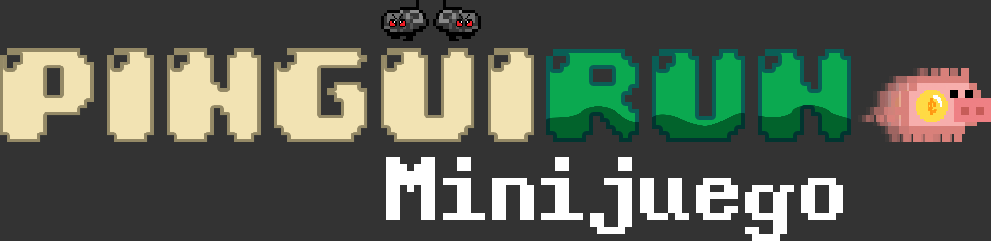
<style>
.page{position:relative;width:991px;height:241px;background:#333333}
.page>*{position:absolute;margin:0}
.t1{font:112.5px "04b30"}
.t2{font:112.5px "Windows-Command-Prompt";color:#ffffff}
</style>
<div class="page">
<p class="t1" style="left:546px;top:49px;width:305px;height:93px">RUN</p>
<p class="t2" style="left:386px;top:157px;width:457px;height:84px">Minijuego</p>
</div>
